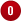
<style>
.page{position:relative;width:21px;height:21px;background:#ffffff}
.page>*{position:absolute;margin:0}
.t1{font:12px "Helvetica-Condensed-Bold";letter-spacing:0.01em;color:#ffffff;text-transform:uppercase}
</style>
<div class="page">
<p class="t1" style="left:8px;top:6px;width:5px;height:10px">0</p>
</div>
